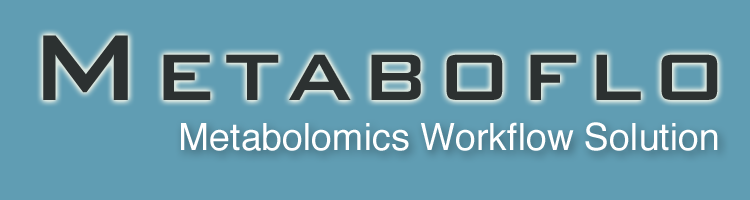
<style>
.page{position:relative;width:750px;height:200px;background:#609db3}
.page>*{position:absolute;margin:0}
.t1{font:125px "BankGothic-Medium";letter-spacing:0.075em;color:#2c3131;font-variant:small-caps}
.t2{font:37.5px "Helvetica";color:#ffffff}
</style>
<div class="page">
<p class="t1" style="left:43px;top:35px;width:675px;height:65px">Metaboflo</p>
<p class="t2" style="left:181px;top:122px;width:537px;height:29px">Metabolomics Workflow Solution</p>
</div>
